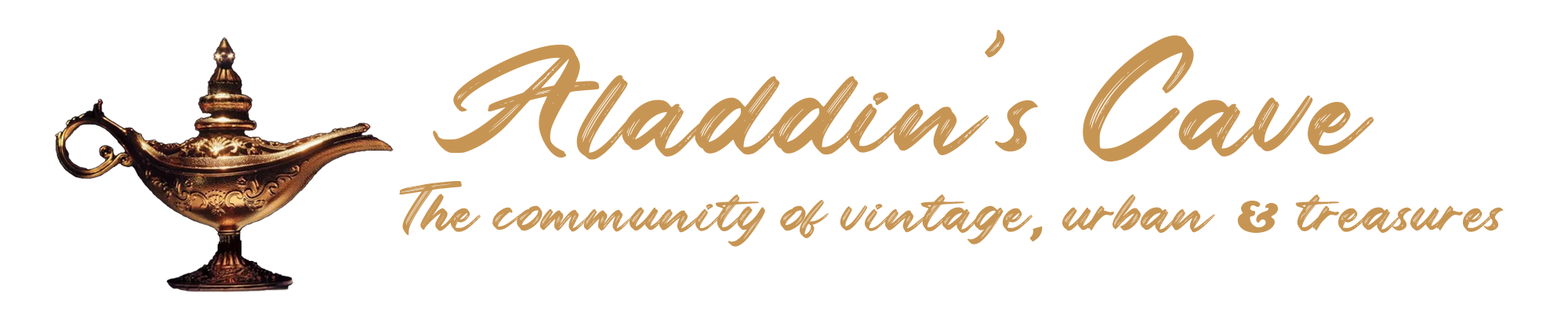
<style>
.page{position:relative;width:1568px;height:330px;background:#ffffff}
.page>*{position:absolute;margin:0}
.t1{font:125.4px "RoasterBrushPersonalUse";color:#c79553}
.t2{font:56.4px "RoasterBrushPersonalUse";color:#c79553}
.t3{font:46.7px "CooperBlack";color:#c79553}
.t4{font:46.7px "BerlinSansFBDemi-Bold";color:#c79553}
</style>
<div class="page">
<p class="t1" style="left:433px;top:29px;width:941px;height:133px">Aladdin’s Cave</p>
<p class="t2" style="left:399px;top:181px;width:1105px;height:66px">The community of vintage  urban     treasures</p>
<p class="t3" style="left:1237px;top:201px;width:42px;height:32px">&amp;</p>
<p class="t4" style="left:1029px;top:227px;width:14px;height:14px">,</p>
</div>
